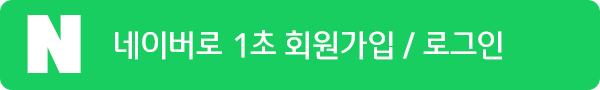
<style>
.page{position:relative;width:600px;height:90px;background:#19ce60}
.page>*{position:absolute;margin:0}
.t1{font:73.3px "Impact";color:#ffffff;scale:1.57 1}
.t2{font:32.8px "OTWelcomeR";color:#ffffff}
</style>
<div class="page">
<p class="t1" style="left:27px;top:15px;width:54px;height:58px">N</p>
<p class="t2" style="left:115px;top:30px;width:387px;height:30px">네이버로 1초 회원가입 / 로그인</p>
</div>
